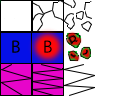
<style>
.page{position:relative;width:128px;height:96px;background:#ffffff}
.page>*{position:absolute;margin:0}
.t1{font:18px "MyriadPro-Regular";color:#000000}
</style>
<div class="page">
<p class="t1" style="left:44px;top:40px;width:8px;height:13px">B</p>
</div>
